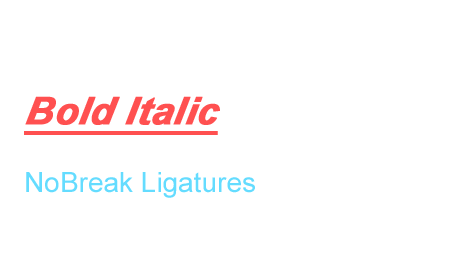
<style>
.page{position:relative;width:460px;height:260px;background:#ffffff}
.page>*{position:absolute;margin:0}
.t1{font:38px "Arial-BoldItalicMT";color:#ff5050;font-weight:bold;font-style:italic;text-decoration:underline}
.t2{font:28px "ArialMT";color:#64dcff}
</style>
<div class="page">
<p class="t1" style="left:24px;top:96px;width:196px;height:39px">Bold Italic</p>
<p class="t2" style="left:26px;top:172px;width:229px;height:26px">NoBreak Ligatures</p>
</div>
